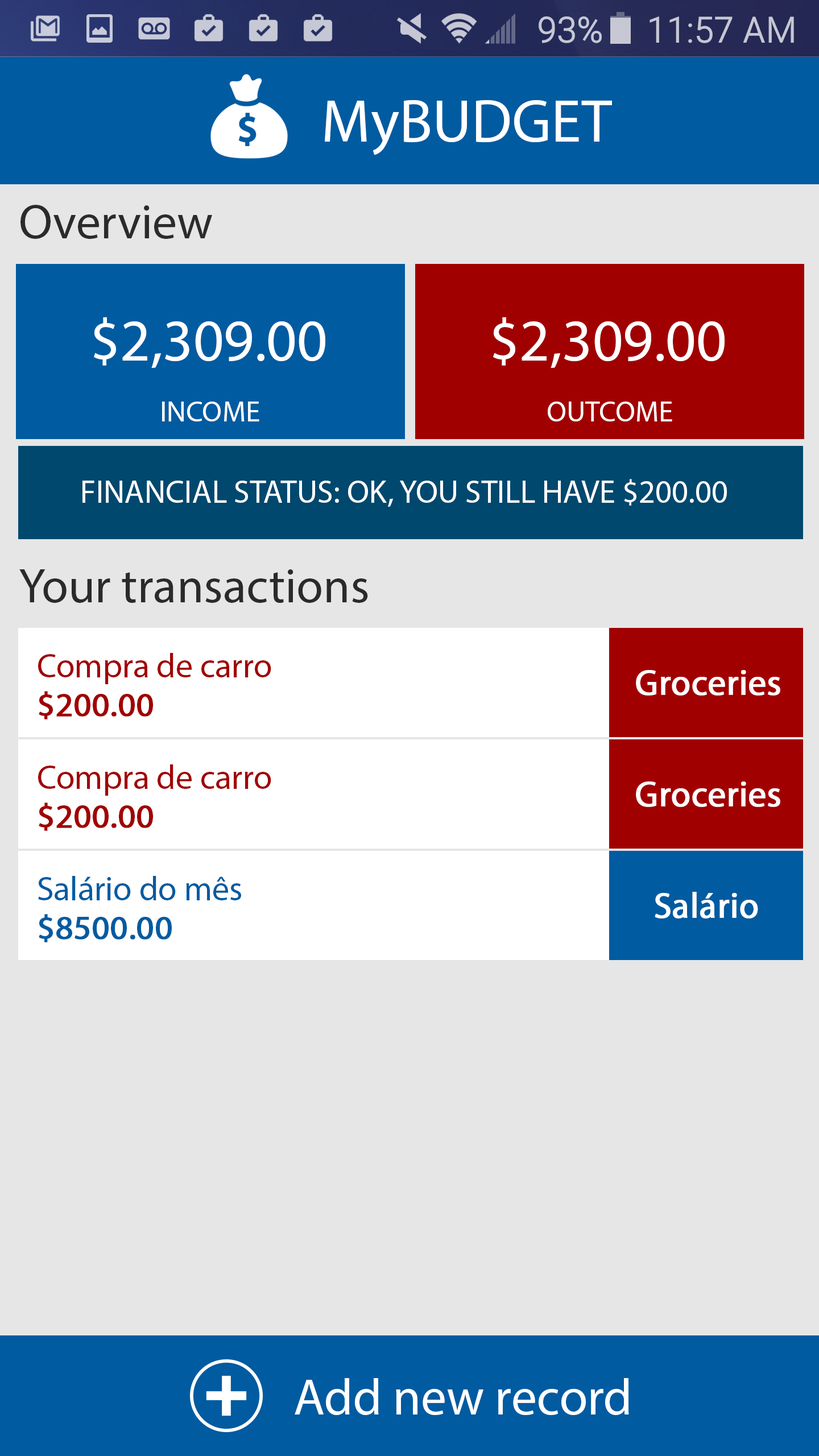
<style>
.page{position:relative;width:819px;height:1456px;background:#e6e6e6}
.page>*{position:absolute;margin:0}
.t1{font:60.7px "MyriadPro-Regular";color:#ffffff}
.t2{font:48.7px "MyriadPro-Regular";color:#2a2a2a}
.t3{font:59.1px "MyriadPro-Regular";color:#ffffff}
.t4{font:29.3px "MyriadPro-Regular";color:#ffffff}
.t5{font:32.4px "MyriadPro-Regular";color:#ffffff}
.t6{font:34px "MyriadPro-Regular";color:#a10000}
.t7{font:35.6px "MyriadPro-Regular";color:#ffffff;font-weight:bold}
.t8{font:34px "MyriadPro-Regular";color:#a10000;font-weight:bold}
.t9{font:34px "MyriadPro-Regular";color:#005ba1}
.t10{font:34px "MyriadPro-Regular";color:#005ba1;font-weight:bold}
.t11{font:51.3px "MyriadPro-Regular";color:#ffffff}
</style>
<div class="page">
<p class="t1" style="left:325px;top:100px;width:287px;height:55px">MyBUDGET</p>
<p class="t2" style="left:20px;top:205px;width:192px;height:34px">Overview</p>
<p class="t3" style="left:94px;top:317px;width:231px;height:51px">$2,309.00</p>
<p class="t3" style="left:493px;top:317px;width:232px;height:51px">$2,309.00</p>
<p class="t4" style="left:162px;top:402px;width:97px;height:19px">INCOME</p>
<p class="t4" style="left:548px;top:402px;width:124px;height:19px">OUTCOME</p>
<p class="t5" style="left:82px;top:479px;width:645px;height:28px">FINANCIAL STATUS: OK, YOU STILL HAVE $200.00</p>
<p class="t2" style="left:19px;top:569px;width:349px;height:34px">Your transactions</p>
<p class="t6" style="left:38px;top:653px;width:233px;height:31px">Compra de carro</p>
<p class="t7" style="left:636px;top:670px;width:144px;height:26px">Groceries</p>
<p class="t8" style="left:39px;top:691px;width:114px;height:28px">$200.00</p>
<p class="t6" style="left:38px;top:764px;width:233px;height:32px">Compra de carro</p>
<p class="t7" style="left:636px;top:781px;width:144px;height:26px">Groceries</p>
<p class="t8" style="left:39px;top:802px;width:114px;height:29px">$200.00</p>
<p class="t9" style="left:38px;top:876px;width:203px;height:24px">Salário do mês</p>
<p class="t7" style="left:655px;top:892px;width:103px;height:27px">Salário</p>
<p class="t10" style="left:39px;top:914px;width:133px;height:28px">$8500.00</p>
<p class="t11" style="left:295px;top:1378px;width:334px;height:37px">Add new record</p>
</div>
